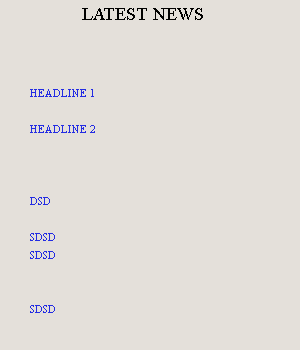
<style>
.page{position:relative;width:300px;height:350px;background:#e4e0da}
.page>*{position:absolute;margin:0}
.t1{font:18px "TimesNewRomanPSMT";color:#010100}
.t2{font:11px/18px "TimesNewRomanPSMT";color:#232ce3}
</style>
<div class="page">
<p class="t1" style="left:82px;top:8px;width:121px;height:12px">LATEST NEWS</p>
<p class="t2" style="left:30px;top:89px;width:65px;height:224px">HEADLINE 1<br><br>HEADLINE 2<br><br><br><br>DSD<br><br>SDSD<br>SDSD<br><br><br>SDSD</p>
</div>
